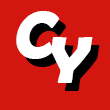
<style>
.page{position:relative;width:110px;height:110px;background:#d41611}
.page>*{position:absolute;margin:0}
.t1{font:66.7px/25px "BerlinSansFBDemi-Bold";color:#ffffff;font-style:italic}
.t2{font:66.7px/25px "BerlinSansFBDemi-Bold";font-style:italic}
</style>
<div class="page">
<p class="t1" style="left:16px;top:11px;width:77px;height:72px">C<br>  Y</p>
<p class="t2" style="left:23px;top:19px;width:77px;height:72px">C<br>  Y</p>
</div>
